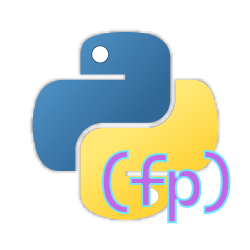
<style>
.page{position:relative;width:250px;height:250px;background:#ffffff}
.page>*{position:absolute;margin:0}
.t1{font:72px "CascadiaCodeRoman-Bold";letter-spacing:-0.1em;font-weight:bold}
</style>
<div class="page">
<p class="t1" style="left:101px;top:150px;width:130px;height:74px">(fp)</p>
</div>
